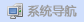
<style>
.page{position:relative;width:84px;height:22px;background:#d0dffd}
.page>*{position:absolute;margin:0}
.t1{font:12px "MicrosoftYaHei";color:#9c9b9b;font-weight:bold}
.t2{font:12px "SimSun";color:#948d8d;font-weight:bold}
</style>
<div class="page">
<p class="t1" style="left:27px;top:4px;width:50px;height:13px"><span class="t2">    </span>系统导航</p>
</div>
